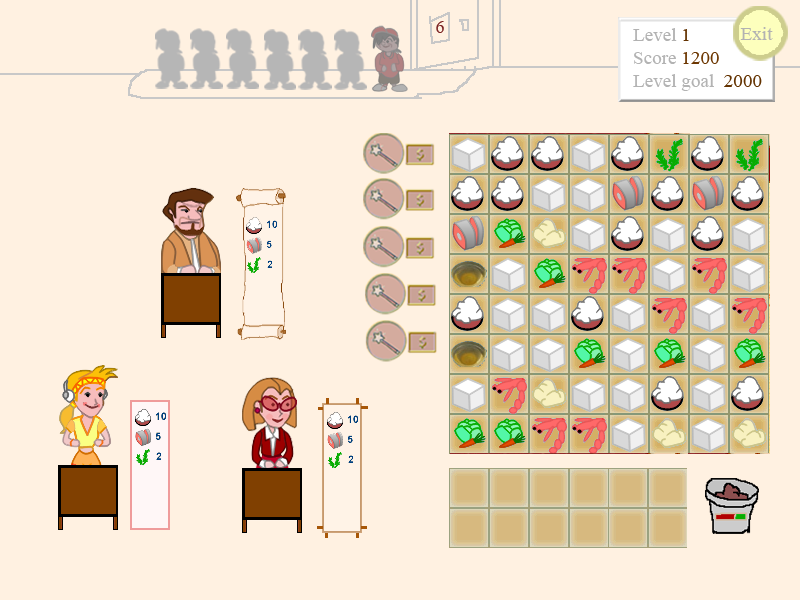
<style>
.page{position:relative;width:800px;height:600px;background:#fff1e1}
.page>*{position:absolute;margin:0}
.t1{font:17.7px "TimesNewRomanPSMT";color:#7b2121}
.t2{font:19.1px "TimesNewRomanPSMT";color:#b3b3b3}
.t3{font:19.1px "TimesNewRomanPSMT";color:#b2b2b2}
.t4{font:19.1px "TimesNewRomanPSMT";color:#633200}
.t5{font:19.1px "TimesNewRomanPSMT";color:#6c3600}
</style>
<div class="page">
<p class="t1" style="left:436px;top:21px;width:8px;height:12px">6</p>
<p class="t2" style="left:633px;top:28px;width:129px;height:63px"><span class="t3">Level </span><span class="t4">1<br></span>Score <span class="t5">1200<br></span>Level goal  <span class="t4">2000</span></p>
<p class="t3" style="left:740px;top:27px;width:33px;height:13px">Exit</p>
</div>
